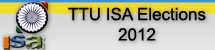
<style>
.page{position:relative;width:215px;height:50px}
.page>*{position:absolute;margin:0}
.t1{font:17px "ArialMT";color:#000000}
</style>
<div class="page">
<p class="t1" style="left:68px;top:7px;width:138px;height:34px;text-align:center">TTU ISA Elections<br>2012</p>
</div>
